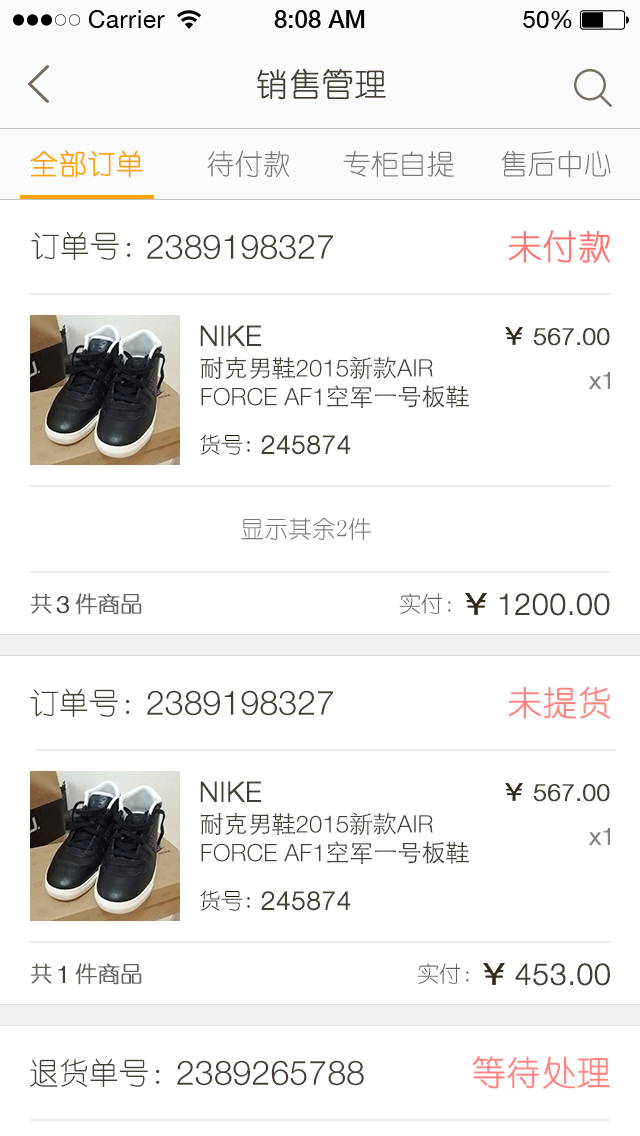
<style>
.page{position:relative;width:640px;height:1136px;background:#ffffff}
.page>*{position:absolute;margin:0}
.t1{font:32px "YouYuan";color:#433d33;text-transform:uppercase;font-weight:bold}
.t2{font:28px "YouYuan";color:#fea200;text-transform:uppercase;font-weight:bold}
.t3{font:28px "YouYuan";color:#7a7772;text-transform:uppercase}
.t4{font:30px "YouYuan";color:#433e34;text-transform:uppercase}
.t5{font:34px "YouYuan";color:#ff5f57;text-transform:uppercase;font-weight:bold}
.t6{font:34px "HelveticaNeueLTPro-Lt";color:#433e34;text-transform:uppercase}
.t7{font:28px "HelveticaNeueLTPro-Lt";color:#433e34;text-transform:uppercase;font-weight:bold}
.t8{font:24px "HelveticaNeueLTPro-Lt";color:#433e34;text-transform:uppercase;font-weight:bold}
.t9{font:24px "HelveticaNeueLTPro-Lt";color:#433e34;text-transform:uppercase}
.t10{font:24px "STHeitiSC-Light";color:#433e34;text-transform:uppercase}
.t11{font:24px "HelveticaNeueLTPro-Lt";color:#86837e;font-weight:bold}
.t12{font:22px "YouYuan";color:#1b1100;text-transform:uppercase}
.t13{font:26px "HelveticaNeueLTPro-Lt";color:#433e34;text-transform:uppercase;font-weight:bold}
.t14{font:24px "YouYuan";color:#7b7973;text-transform:uppercase}
.t15{font:22px "YouYuan";color:#625e58;text-transform:uppercase;font-weight:bold}
.t16{font:22px "YouYuan";color:#625e58;text-transform:uppercase}
.t17{font:30px "HelveticaNeueLTPro-Lt";color:#433e34;text-transform:uppercase;font-weight:bold}
.t18{font:34px "YouYuan";color:#ff746e;text-transform:uppercase;font-weight:bold}
</style>
<div class="page">
<p class="t1" style="left:257px;top:68px;width:129px;height:32px">销售管理</p>
<p class="t2" style="left:30px;top:150px;width:113px;height:28px">全部订单</p>
<p class="t3" style="left:207px;top:150px;width:82px;height:27px">待付款</p>
<p class="t3" style="left:343px;top:150px;width:111px;height:27px">专柜自提</p>
<p class="t3" style="left:501px;top:150px;width:110px;height:27px">售后中心</p>
<p class="t4" style="left:31px;top:232px;width:100px;height:28px">订单号：</p>
<p class="t5" style="left:508px;top:230px;width:102px;height:33px;opacity:0.9">未付款</p>
<p class="t6" style="left:147px;top:234px;width:186px;height:26px">2389198327</p>
<p class="t7" style="left:200px;top:325px;width:62px;height:21px">NIKE</p>
<p class="t8" style="left:533px;top:328px;width:77px;height:18px">567.00</p>
<p class="t9" style="left:200px;top:356px;width:269px;height:52px"><span class="t10">耐克男鞋</span>2015<span class="t10">新款</span>air force AF1<span class="t10">空军一号板鞋</span></p>
<p class="t11" style="left:589px;top:372px;width:21px;height:17px">x1</p>
<p class="t12" style="left:200px;top:434px;width:50px;height:21px">货号:</p>
<p class="t13" style="left:261px;top:435px;width:90px;height:20px">245874</p>
<p class="t14" style="left:241px;top:517px;width:131px;height:24px">显示其余2件</p>
<p class="t15" style="left:30px;top:593px;width:22px;height:21px">共</p>
<p class="t15" style="left:75px;top:593px;width:67px;height:22px">件商品</p>
<p class="t16" style="left:399px;top:593px;width:52px;height:21px">实付：</p>
<p class="t17" style="left:499px;top:593px;width:111px;height:23px">1200.00</p>
<p class="t8" style="left:56px;top:596px;width:13px;height:18px">3</p>
<p class="t4" style="left:30px;top:689px;width:100px;height:28px">订单号：</p>
<p class="t18" style="left:508px;top:686px;width:102px;height:33px;opacity:0.9">未提货</p>
<p class="t6" style="left:147px;top:690px;width:186px;height:26px">2389198327</p>
<p class="t7" style="left:200px;top:781px;width:62px;height:21px">NIKE</p>
<p class="t8" style="left:533px;top:784px;width:77px;height:18px">567.00</p>
<p class="t9" style="left:200px;top:812px;width:269px;height:52px"><span class="t10">耐克男鞋</span>2015<span class="t10">新款</span>air force AF1<span class="t10">空军一号板鞋</span></p>
<p class="t11" style="left:589px;top:828px;width:21px;height:17px">x1</p>
<p class="t12" style="left:200px;top:890px;width:50px;height:21px">货号:</p>
<p class="t13" style="left:261px;top:891px;width:90px;height:20px">245874</p>
<p class="t15" style="left:30px;top:963px;width:22px;height:21px">共</p>
<p class="t8" style="left:58px;top:966px;width:7px;height:17px">1</p>
<p class="t15" style="left:75px;top:963px;width:67px;height:22px">件商品</p>
<p class="t16" style="left:417px;top:963px;width:52px;height:21px">实付：</p>
<p class="t17" style="left:515px;top:963px;width:95px;height:23px">453.00</p>
<p class="t4" style="left:30px;top:1059px;width:130px;height:28px">退货单号：</p>
<p class="t6" style="left:177px;top:1060px;width:187px;height:26px">2389265788</p>
<p class="t18" style="left:472px;top:1056px;width:138px;height:33px;opacity:0.9">等待处理</p>
</div>
